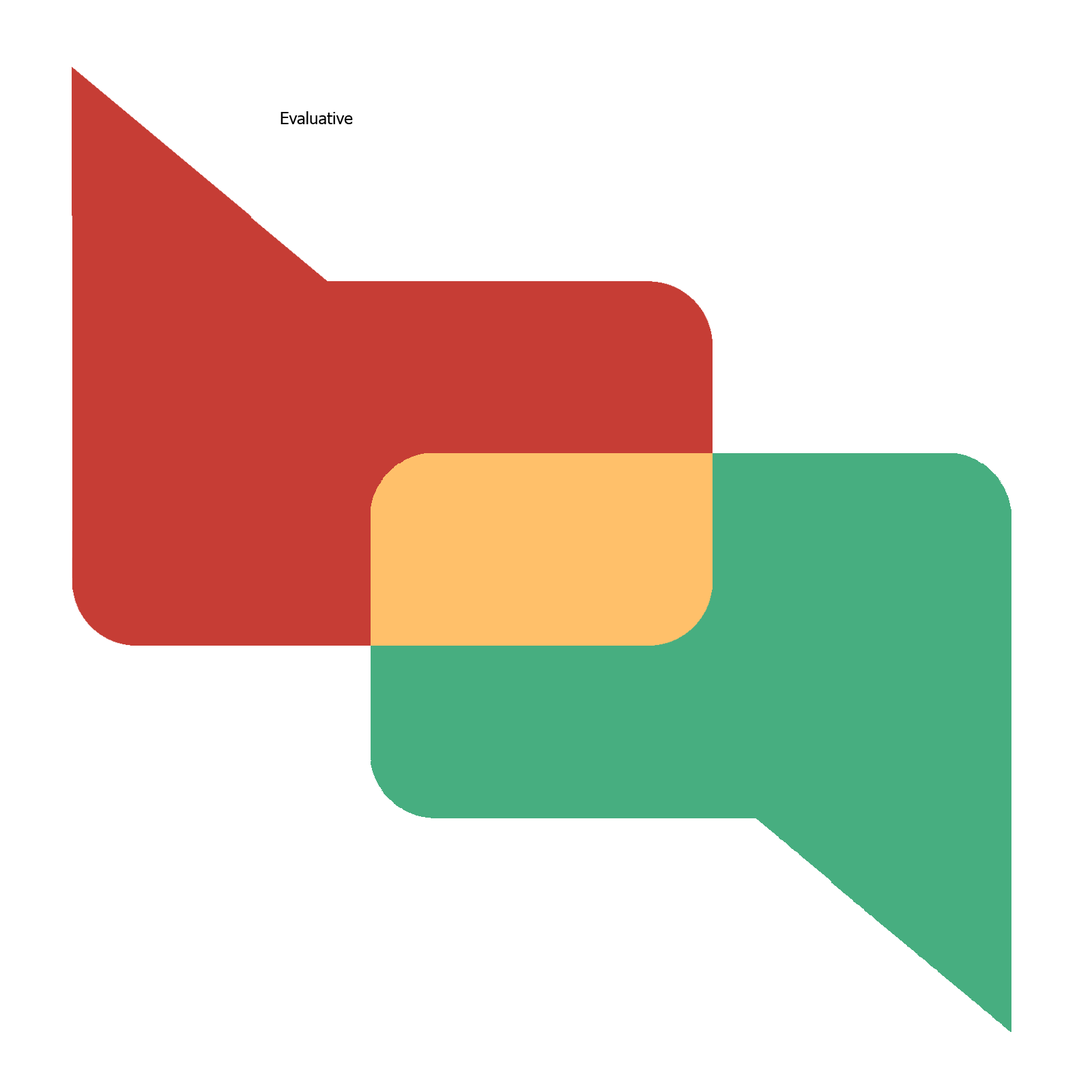
<style>
.page{position:relative;width:1092px;height:1092px;background:#ffffff}
.page>*{position:absolute;margin:0}
.t1{font:16.4px "Tahoma";color:#000000}
</style>
<div class="page">
<p class="t1" style="left:281px;top:111px;width:72px;height:13px">Evaluative</p>
</div>
